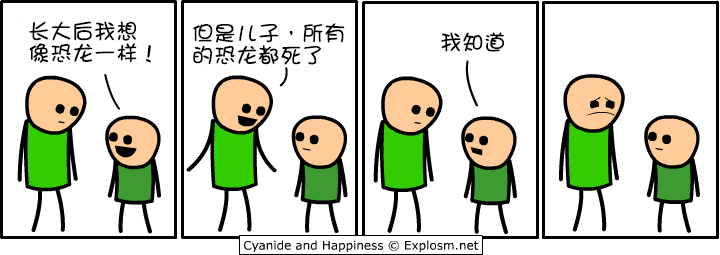
<style>
.page{position:relative;width:720px;height:255px;background:#ffffff}
.page>*{position:absolute;margin:0}
.t1{font:22px/22px "DFGirl";color:#000000}
.t2{font:22px "DFGirl";color:#000000}
</style>
<div class="page">
<p class="t1" style="left:29px;top:21px;width:123px;height:42px">长大后我想<br>像恐龙一样！</p>
<p class="t1" style="left:193px;top:23px;width:152px;height:42px">但是儿子，所有<br>的恐龙都死了</p>
<p class="t2" style="left:441px;top:32px;width:63px;height:20px">我知道</p>
</div>
